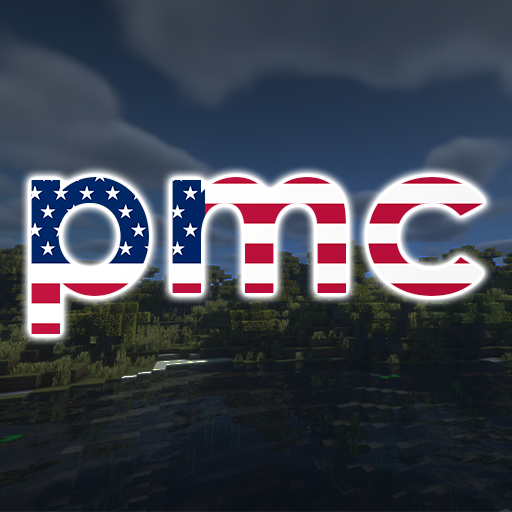
<style>
.page{position:relative;width:512px;height:512px}
.page>*{position:absolute;margin:0}
.t1{font:213.6px "CenturyGothicPro-Bold"}
</style>
<div class="page">
<p class="t1" style="left:31px;top:177px;width:454px;height:157px">pmc</p>
</div>
